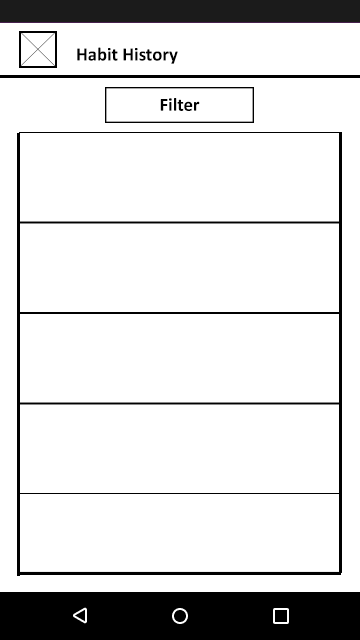
<style>
.page{position:relative;width:360px;height:640px;background:#ffffff}
.page>*{position:absolute;margin:0}
.t1{font:18.9px "Calibri-Bold";color:#000000}
.t2{font:18.7px "Calibri-Bold";color:#000000}
</style>
<div class="page">
<p class="t1" style="left:77px;top:47px;width:101px;height:17px">Habit History</p>
<p class="t2" style="left:160px;top:98px;width:40px;height:13px">Filter</p>
</div>
